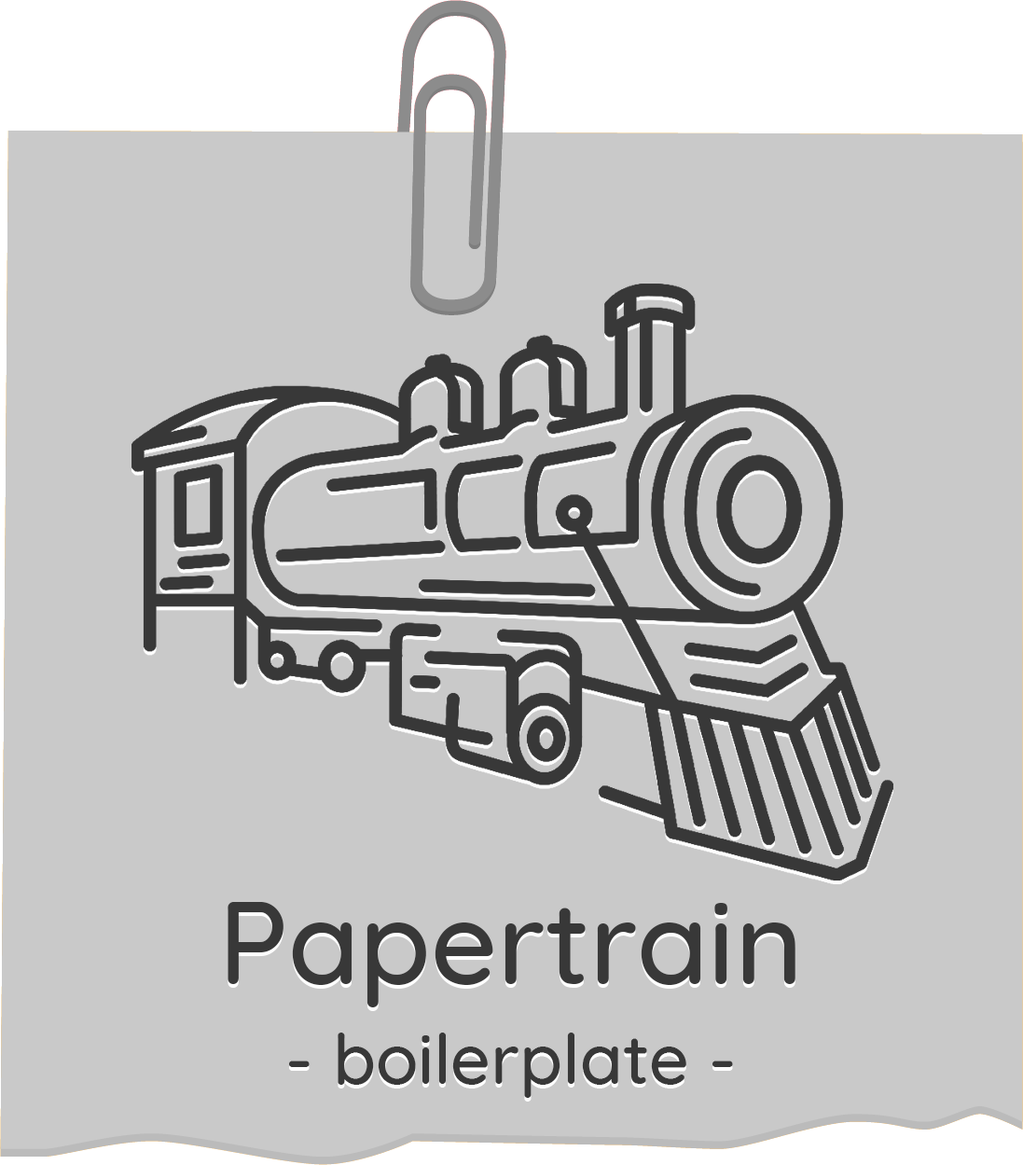
<style>
.page{position:relative;width:1023px;height:1165px;background:#c9c9c9}
.page>*{position:absolute;margin:0}
.t1{font:70px/81.2px "Quicksand-Medium";color:#383838}
.t2{font:116.6px/18.7px "Quicksand-Medium";color:#383838}
</style>
<div class="page">
<p class="t1" style="left:228px;top:902px;width:568px;height:196px;text-align:center"><span class="t2">Papertrain<br><br></span>- boilerplate -</p>
</div>
